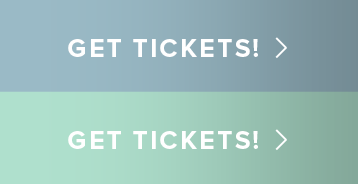
<style>
.page{position:relative;width:358px;height:184px}
.page>*{position:absolute;margin:0}
.t1{font:26.4px "ProximaNova-Bold";letter-spacing:0.075em;color:#ffffff}
</style>
<div class="page">
<p class="t1" style="left:68px;top:39px;width:190px;height:18px">GET TICKETS!</p>
<p class="t1" style="left:68px;top:131px;width:190px;height:18px">GET TICKETS!</p>
</div>
